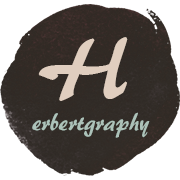
<style>
.page{position:relative;width:180px;height:180px;background:#ffffff}
.page>*{position:absolute;margin:0}
.t1{font:90px "ARBERKLEY";color:#e0cebf}
.t2{font:25px "ARBERKLEY";color:#acc2b9}
</style>
<div class="page">
<p class="t1" style="left:38px;top:37px;width:90px;height:64px">H</p>
<p class="t2" style="left:32px;top:112px;width:118px;height:26px">erbertgraphy</p>
</div>
